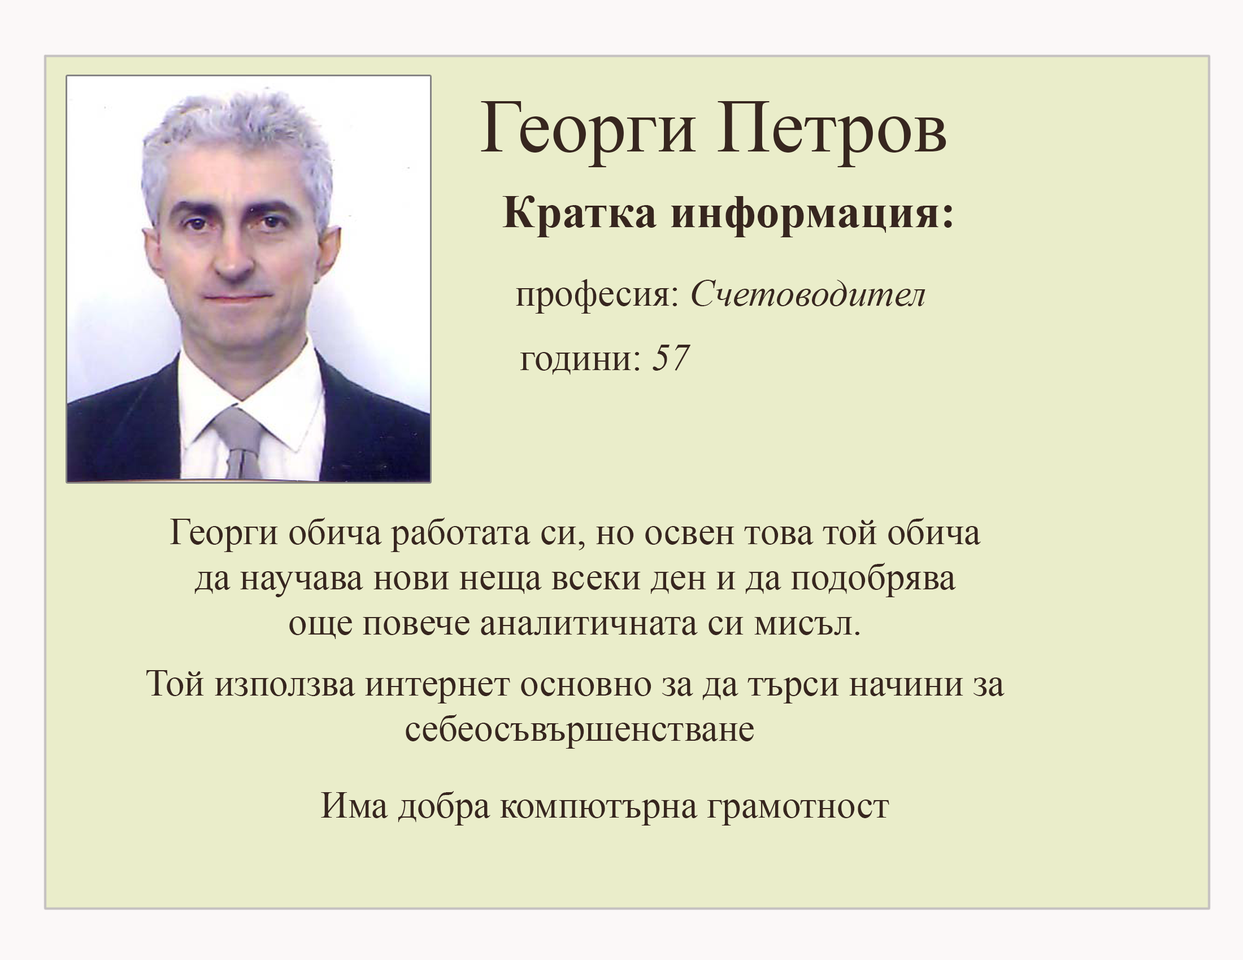
<style>
.page{position:relative;width:1243px;height:960px;background:#eaedca}
.page>*{position:absolute;margin:0}
.t1{font:75.3px "TimesNewRomanPSMT";color:#37261f}
.t2{font:47.1px "TimesNewRomanPS-BoldMT";color:#37261f}
.t3{font:37.7px "TimesNewRomanPS-ItalicMT";color:#37261f}
.t4{font:37.7px "TimesNewRomanPSMT";color:#37261f}
</style>
<div class="page">
<p class="t1" style="left:481px;top:101px;width:465px;height:66px">Георги Петров</p>
<p class="t2" style="left:502px;top:195px;width:450px;height:42px">Кратка информация:</p>
<p class="t3" style="left:516px;top:279px;width:409px;height:34px"><span class="t4">професия: </span>Счетоводител</p>
<p class="t4" style="left:520px;top:345px;width:170px;height:29px">години: <span class="t3">57</span></p>
<p class="t4" style="left:170px;top:517px;width:811px;height:122px;text-align:center">Георги обича работата си, но освен това той обича<br>да научава нови неща всеки ден и да подобрява<br>още повече аналитичната си мисъл.</p>
<p class="t4" style="left:146px;top:670px;width:858px;height:78px;text-align:center">Той използва интернет основно за да търси начини за <br>себеосъвършенстване</p>
<p class="t4" style="left:321px;top:791px;width:568px;height:34px">Има добра компютърна грамотност</p>
</div>
